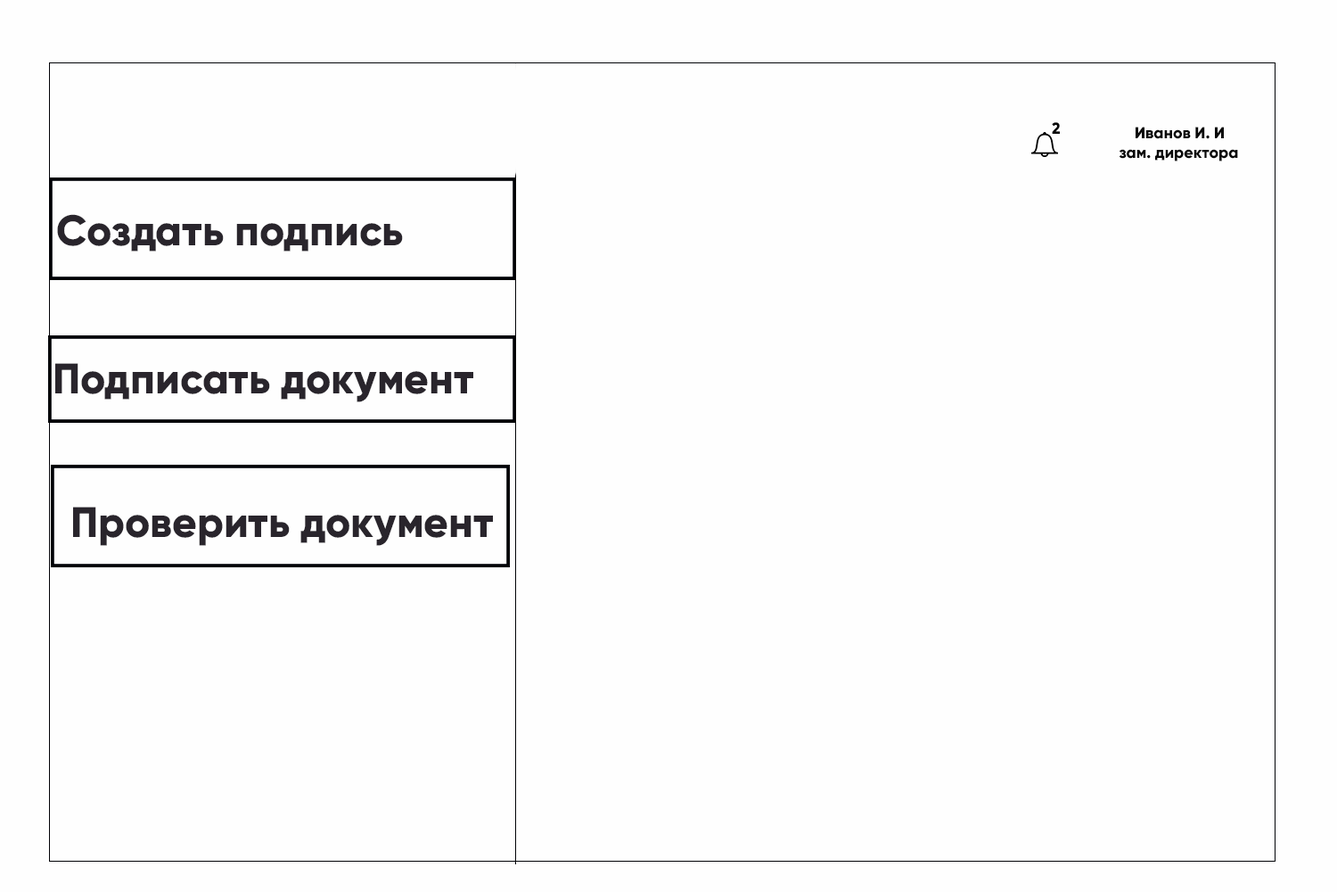
<style>
.page{position:relative;width:1337px;height:892px;background:#fefefe}
.page>*{position:absolute;margin:0}
.t1{font:16px "Gilroy-ExtraBold";color:#080808}
.t2{font:42.8px "Gilroy-ExtraBold";color:#29252c}
</style>
<div class="page">
<p class="t1" style="left:1052px;top:122px;width:8px;height:12px">2</p>
<p class="t1" style="left:1136px;top:127px;width:88px;height:12px">Иванов И. И</p>
<p class="t1" style="left:1119px;top:149px;width:119px;height:12px">зам. директора</p>
<p class="t2" style="left:57px;top:214px;width:346px;height:37px">Создать подпись</p>
<p class="t2" style="left:55px;top:363px;width:418px;height:39px">Подписать документ</p>
<p class="t2" style="left:73px;top:506px;width:420px;height:40px">Проверить документ</p>
</div>
